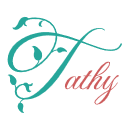
<style>
.page{position:relative;width:130px;height:130px;background:#ffffff}
.page>*{position:absolute;margin:0}
.t1{font:40px "FleurDeLeah-Regular";color:#cd5c5c}
.t2{font:96px "FleurDeLeah-Regular";color:#26a69a}
</style>
<div class="page">
<p class="t1" style="left:7px;top:16px;width:116px;height:97px"><span class="t2">T</span>athy</p>
</div>
